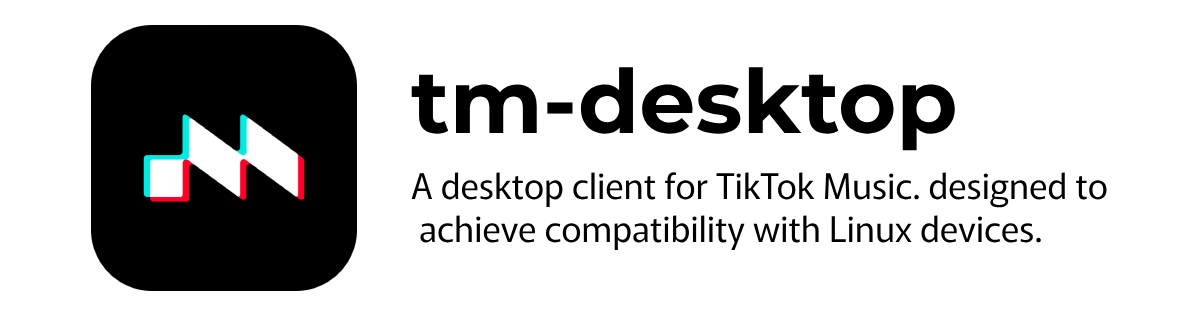
<style>
.page{position:relative;width:1200px;height:315px;background:#ffffff}
.page>*{position:absolute;margin:0}
.t1{font:88.8px "Montserrat-Bold";color:#000000}
.t2{font:35.2px "Murecho-Regular";color:#000000}
</style>
<div class="page">
<p class="t1" style="left:411px;top:67px;width:544px;height:84px">tm-desktop</p>
<p class="t2" style="left:411px;top:172px;width:696px;height:78px">A desktop client for TikTok Music. designed to<br> achieve compatibility with Linux devices.</p>
</div>
